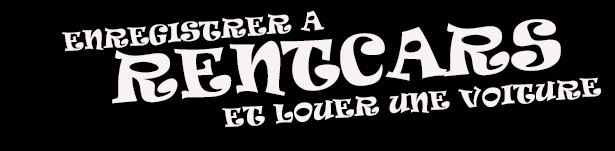
<style>
.page{position:relative;width:615px;height:151px;background:#000000}
.page>*{position:absolute;margin:0}
.t1{font:24px/33px "Ravie";color:#f8f2f2;text-transform:uppercase}
.t2{font:24px/59px "Ravie";color:#f8f2f2;text-transform:uppercase}
.t3{font:63.3px/56px "Ravie";color:#f8f2f2;text-transform:uppercase}
</style>
<div class="page">
<p class="t1" style="left:62px;top:10px;width:539px;height:118px;text-align:center;rotate:-5deg"><span class="t2">Enregistrer a                   </span><span class="t3"><br>   RENTCARS</span> <br>                         ET LOUER UNE VOITURE</p>
</div>
